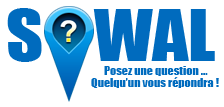
<style>
.page{position:relative;width:224px;height:107px;background:#ffffff}
.page>*{position:absolute;margin:0}
.t1{font:66.2px "Impact";color:#006bbe;scale:1.09 1}
.t2{font:11px "Impact";color:#006bbe;scale:1.09 1}
</style>
<div class="page">
<p class="t1" style="left:7px;top:8px;width:208px;height:54px">S    WAL</p>
<p class="t2" style="left:91px;top:77px;width:128px;height:11px">Quelqu’un vous répondra !</p>
<p class="t2" style="left:104px;top:66px;width:104px;height:10px">Posez une question ...</p>
</div>
